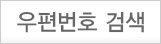
<style>
.page{position:relative;width:161px;height:44px;background:#ffffff}
.page>*{position:absolute;margin:0}
.t1{font:23px "YDVYGO33";color:#666666;scale:0.95 1}
</style>
<div class="page">
<p class="t1" style="left:17px;top:11px;width:127px;height:22px">우편번호 검색</p>
</div>
